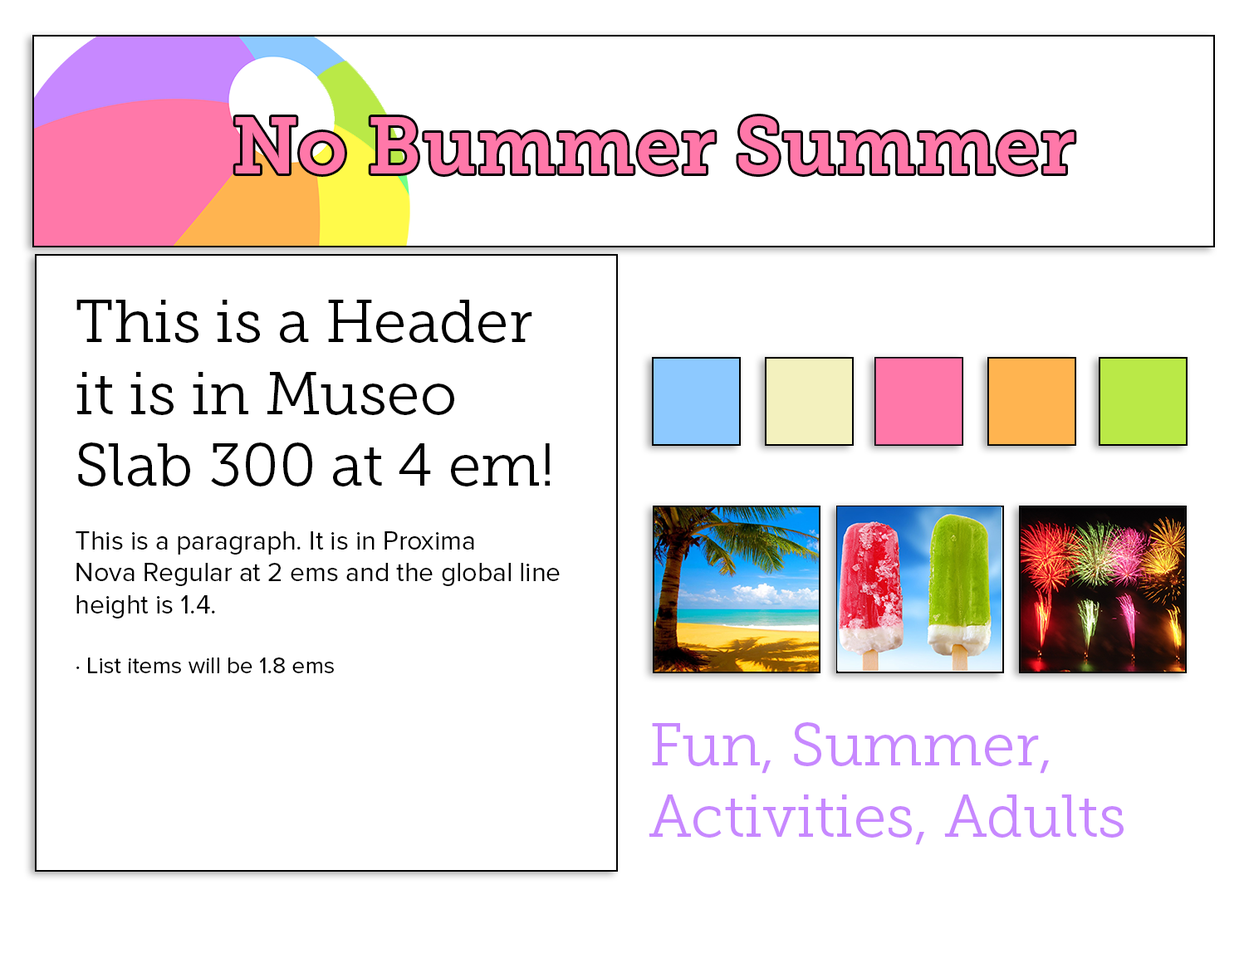
<style>
.page{position:relative;width:1244px;height:958px;background:#ffffff}
.page>*{position:absolute;margin:0}
.t1{font:79.7px "MuseoSlab-700";color:#ff78a9}
.t2{font:26.6px "ProximaNova-Regular";color:#000000}
.t3{font:59.8px "MuseoSlab-300";color:#000000}
.t4{font:23.3px "ProximaNova-Regular";color:#000000}
.t5{font:59.8px "MuseoSlab-300";color:#c788ff}
</style>
<div class="page">
<p class="t1" style="left:235px;top:116px;width:840px;height:58px">No Bummer Summer</p>
<p class="t2" style="left:76px;top:300px;width:484px;height:374px"><span class="t3">This is a Header <br>it is in Museo <br>Slab 300 at 4 em!<br></span><br>This is a paragraph. It is in Proxima<br>Nova Regular at 2 ems and the global line<br>height is 1.4.<br><br><span class="t4">· List items will be 1.8 ems</span></p>
<p class="t5" style="left:649px;top:723px;width:475px;height:122px">Fun, Summer,<br>Activities, Adults</p>
</div>
